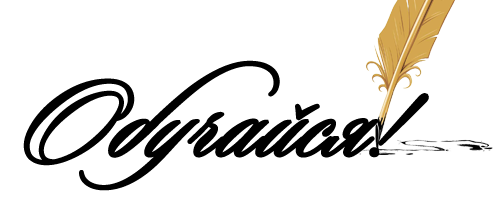
<style>
.page{position:relative;width:495px;height:207px;background:#ffffff}
.page>*{position:absolute;margin:0}
.t1{font:117px "CeremoniousThree";color:#000000;font-weight:bold}
</style>
<div class="page">
<p class="t1" style="left:23px;top:60px;width:406px;height:131px">Обучайся!</p>
</div>
